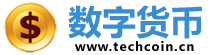
<style>
.page{position:relative;width:215px;height:55px;background:#ffffff}
.page>*{position:absolute;margin:0}
.t1{font:34px "MicrosoftYaHei-Bold";color:#398dd5}
.t2{font:12px "MicrosoftYaHei-Bold";letter-spacing:0.1em;color:#000000}
</style>
<div class="page">
<p class="t1" style="left:68px;top:5px;width:135px;height:34px">数字货币</p>
<p class="t2" style="left:75px;top:41px;width:119px;height:10px">www.techcoin.cn</p>
</div>
